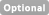
<style>
.page{position:relative;width:49px;height:15px;background:#a9a9a9}
.page>*{position:absolute;margin:0}
.t1{font:10px "SukhumvitSet-Bold";letter-spacing:0.05em;color:#ffffff}
</style>
<div class="page">
<p class="t1" style="left:3px;top:4px;width:42px;height:9px">Optional</p>
</div>
